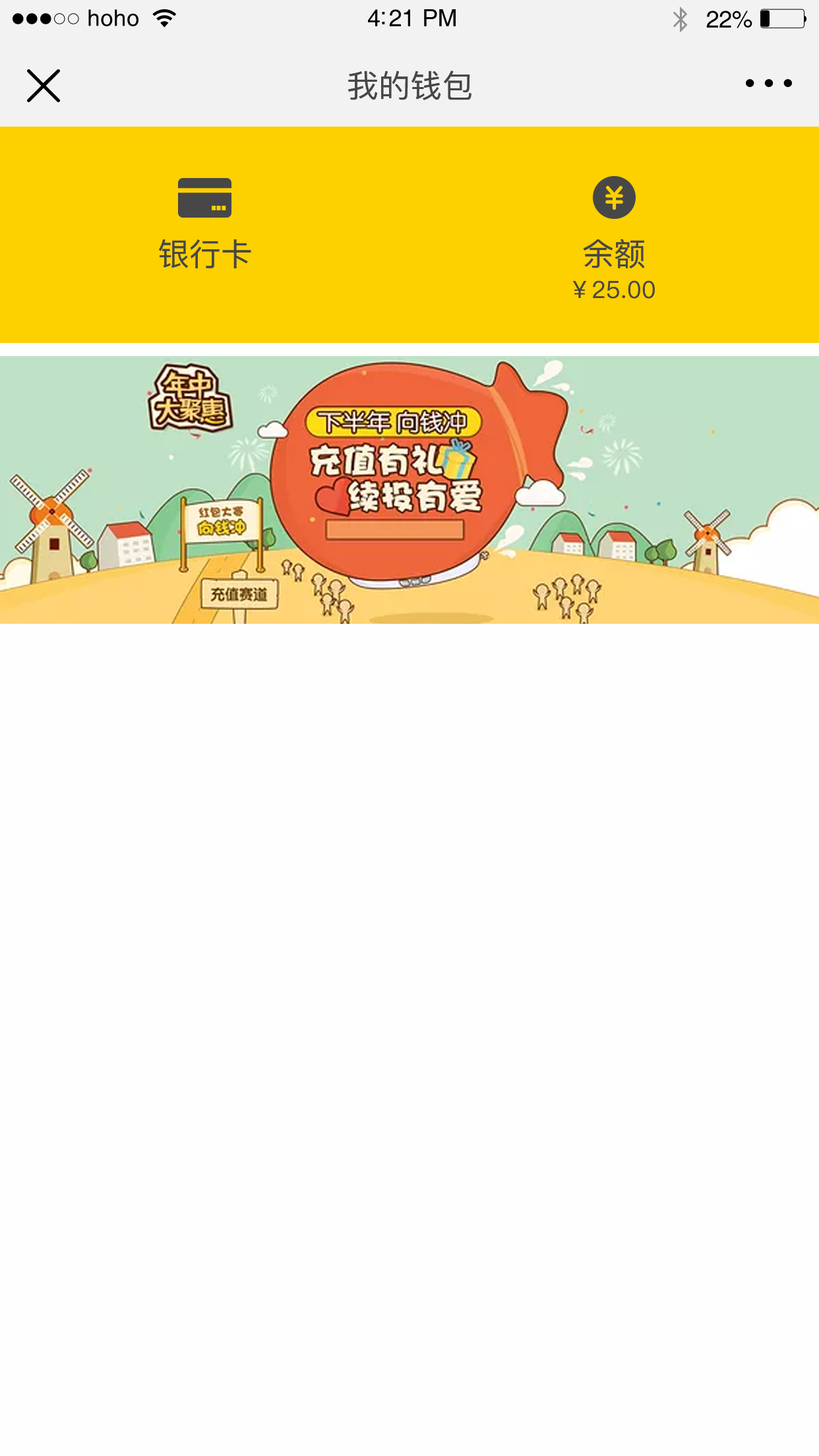
<style>
.page{position:relative;width:819px;height:1456px;background:#fffeff}
.page>*{position:absolute;margin:0}
.t1{font:22.8px "Helvetica";letter-spacing:0.02em;color:#000000}
.t2{font:23.8px "Helvetica";letter-spacing:-0.02em;color:#000000}
.t3{font:31.7px "PingFang-SC-Medium";color:#474747}
.t4{font:23.7px "PingFang-SC-Medium";color:#474747}
</style>
<div class="page">
<p class="t1" style="left:88px;top:9px;width:50px;height:17px">hoho</p>
<p class="t2" style="left:368px;top:9px;width:88px;height:17px">4:21 PM</p>
<p class="t2" style="left:706px;top:11px;width:46px;height:17px">22%</p>
<p class="t3" style="left:348px;top:71px;width:123px;height:29px">我的钱包</p>
<p class="t3" style="left:159px;top:239px;width:92px;height:29px">银行卡</p>
<p class="t3" style="left:583px;top:239px;width:62px;height:29px">余额</p>
<p class="t4" style="left:573px;top:280px;width:82px;height:19px">￥25.00</p>
</div>
